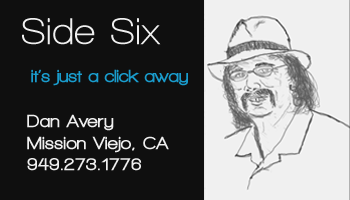
<style>
.page{position:relative;width:350px;height:200px;background:#0f0f0f}
.page>*{position:absolute;margin:0}
.t1{font:38px "WalkwayBold";letter-spacing:0.025em;color:#f0f0f0}
.t2{font:18px "WalkwayBlack";color:#199ccd}
.t3{font:18px "WalkwayBlack";letter-spacing:0.025em;color:#f0f0f0}
</style>
<div class="page">
<p class="t1" style="left:22px;top:18px;width:139px;height:27px">Side Six</p>
<p class="t2" style="left:31px;top:69px;width:157px;height:17px">it’s just a click away</p>
<p class="t3" style="left:27px;top:114px;width:142px;height:57px">Dan Avery<br>Mission Viejo, CA<br>949.273.1776</p>
</div>
